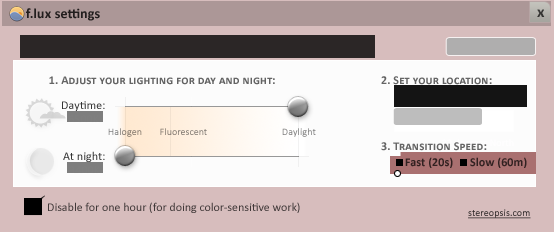
<style>
.page{position:relative;width:554px;height:232px;background:#fcfcfc}
.page>*{position:absolute;margin:0}
.t1{font:14px "Calibri-Bold";letter-spacing:0.01em;color:#221e1e}
.t2{font:16px "Calibri-Bold";color:#353533}
.t3{font:12px "Calibri-Bold";letter-spacing:0.01em;color:#646464;font-variant:small-caps}
.t4{font:12px "Calibri-Bold";letter-spacing:0.01em;color:#656565;font-variant:small-caps}
.t5{font:12px "Calibri-Bold";letter-spacing:0.01em;color:#322121}
.t6{font:12px "Calibri";color:#403838}
.t7{font:10px "Calibri";letter-spacing:0.01em;text-decoration:underline}
</style>
<div class="page">
<p class="t1" style="left:26px;top:8px;width:74px;height:13px">f.lux settings</p>
<p class="t2" style="left:537px;top:9px;width:8px;height:8px">x</p>
<p class="t3" style="left:49px;top:76px;width:226px;height:9px">1. Adjust your lighting for day and night:</p>
<p class="t3" style="left:381px;top:76px;width:111px;height:9px">2. Set your location:</p>
<p class="t4" style="left:381px;top:142px;width:106px;height:9px">3. Transition Speed:</p>
<p class="t5" style="left:405px;top:157px;width:48px;height:11px">Fast (20s)</p>
<p class="t5" style="left:470px;top:157px;width:57px;height:11px">Slow (60m)</p>
<p class="t6" style="left:48px;top:202px;width:252px;height:11px">Disable for one hour (for doing color-sensitive work)</p>
<p class="t7" style="left:468px;top:209px;width:63px;height:10px">stereopsis.com</p>
</div>
